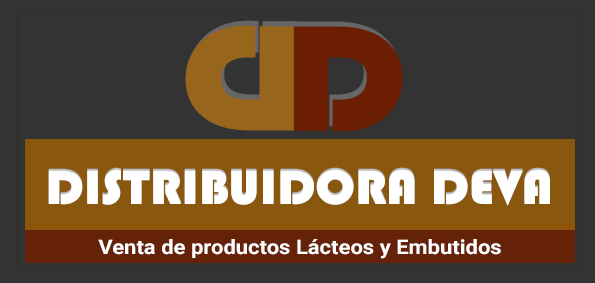
<style>
.page{position:relative;width:595px;height:283px;background:#333333}
.page>*{position:absolute;margin:0}
.t1{font:154px "Bauhaus93";color:#98651c;font-weight:bold;scale:1.09 1}
.t2{font:154px "Bauhaus93";letter-spacing:-0.05em;color:#6c1e03;font-weight:bold;scale:1.09 1}
.t3{font:50px "Bauhaus93";color:#ffffff;scale:1.05 1}
.t4{font:20px "Roboto-Bold";color:#ffffff;scale:1.1 1}
</style>
<div class="page">
<p class="t1" style="left:185px;top:25px;width:110px;height:106px;rotate:180deg">D</p>
<p class="t1" style="left:188px;top:20px;width:110px;height:106px;rotate:180deg">D</p>
<p class="t2" style="left:290px;top:21px;width:110px;height:106px">D</p>
<p class="t2" style="left:293px;top:26px;width:110px;height:106px">D</p>
<p class="t3" style="left:48px;top:167px;width:502px;height:37px">DISTRIBUIDORA DEVA</p>
<p class="t3" style="left:48px;top:169px;width:502px;height:37px">DISTRIBUIDORA DEVA</p>
<p class="t4" style="left:98px;top:239px;width:403px;height:20px">Venta de productos Lácteos y Embutidos</p>
</div>
